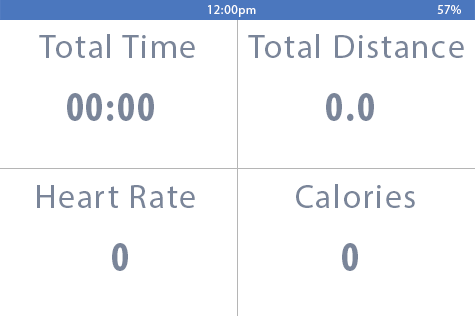
<style>
.page{position:relative;width:475px;height:316px;background:#ffffff}
.page>*{position:absolute;margin:0}
.t1{font:12.5px "MyriadPro-Regular";letter-spacing:0.05em;color:#ffffff}
.t2{font:33.3px "MyriadPro-Regular";letter-spacing:0.05em;color:#7a8599}
.t3{font:41.7px "MyriadPro-BoldCond";letter-spacing:0.05em;color:#7a8599}
</style>
<div class="page">
<p class="t1" style="left:208px;top:5px;width:48px;height:12px">12:00pm</p>
<p class="t1" style="left:437px;top:5px;width:24px;height:9px">57%</p>
<p class="t2" style="left:39px;top:34px;width:156px;height:24px">Total Time</p>
<p class="t2" style="left:248px;top:34px;width:216px;height:24px">Total Distance</p>
<p class="t3" style="left:67px;top:93px;width:87px;height:28px">00:00</p>
<p class="t3" style="left:326px;top:93px;width:48px;height:28px">0.0</p>
<p class="t2" style="left:37px;top:185px;width:158px;height:23px">Heart Rate</p>
<p class="t2" style="left:296px;top:184px;width:119px;height:24px">Calories</p>
<p class="t3" style="left:112px;top:243px;width:16px;height:28px">0</p>
<p class="t3" style="left:342px;top:243px;width:16px;height:28px">0</p>
</div>
